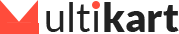
<style>
.page{position:relative;width:179px;height:34px;background:#ffffff}
.page>*{position:absolute;margin:0}
.t1{font:40px "Lato-Regular";color:#222222}
.t2{font:40px "Lato-Black";color:#222222}
</style>
<div class="page">
<p class="t1" style="left:46px;top:2px;width:133px;height:30px">ulti<span class="t2">kart</span></p>
</div>
